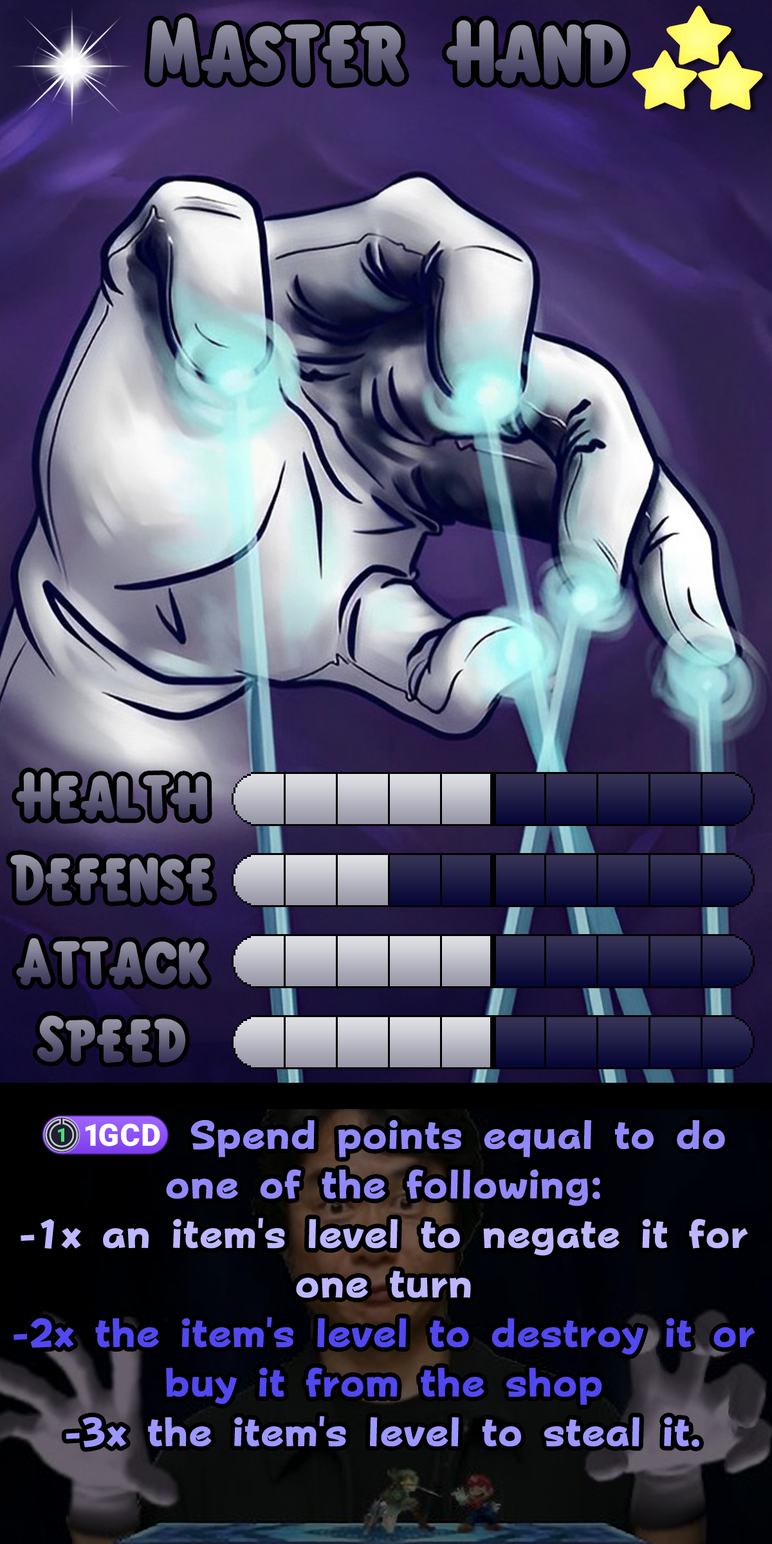
<style>
.page{position:relative;width:772px;height:1544px}
.page>*{position:absolute;margin:0}
.t1{font:135.1px "KirbyClassic"}
.t2{font:100.4px "KirbyClassic"}
.t3{font:68.9px/49.5px "FOTPopHappinessStrp-ExtraBold";color:#5148f0}
.t4{font:68.9px/49.5px "stoogedings-Regular";color:#9289f9}
.t5{font:68.9px/49.5px "FOTPopHappinessStrp-ExtraBold";color:#9289f9}
.t6{font:68.9px/49.5px "FOTPopHappinessStrp-ExtraBold";color:#bdb7ff}
.t7{font:68.9px/49.5px "FOTPopHappinessStrp-ExtraBold";color:#9d98ff}
</style>
<div class="page">
<p class="t1" style="left:149px;top:17px;width:477px;height:68px">Master Hand</p>
<p class="t2" style="left:16px;top:772px;width:192px;height:48px">Health</p>
<p class="t2" style="left:10px;top:855px;width:203px;height:48px">Defense</p>
<p class="t2" style="left:16px;top:938px;width:191px;height:48px">Attack</p>
<p class="t2" style="left:37px;top:1015px;width:149px;height:48px">Speed</p>
<p class="t3" style="left:14px;top:1115px;width:741px;height:333px;text-align:center"><span class="t4">(1GCD)</span><span class="t5"> Spend points equal to do one of the following:<br></span><span class="t6">-1x an item's level to negate it for one turn<br></span>-2x the item's level to destroy it or buy it from the shop<br><span class="t7">-3x the item's level to steal it.</span></p>
</div>
